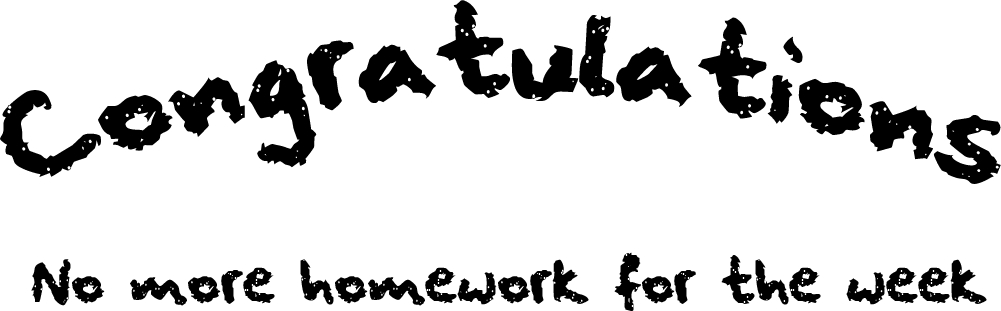
<style>
.page{position:relative;width:1001px;height:311px;background:#ffffff}
.page>*{position:absolute;margin:0}
.t1{font:100px "squeakychalksound";color:#000000}
.t2{font:50px "squeakychalksound";color:#000000}
</style>
<div class="page">
<p class="t1" style="left:0px;top:0px;width:1001px;height:184px">Congratulations</p>
<p class="t2" style="left:31px;top:252px;width:956px;height:59px">No more homework for the week</p>
</div>
